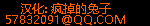
<style>
.page{position:relative;width:150px;height:26px;background:#000000}
.page>*{position:absolute;margin:0}
.t1{font:12px/11px "MicrosoftYaHei";color:#ff5f00}
</style>
<div class="page">
<p class="t1" style="left:6px;top:3px;width:119px;height:22px;text-align:center">汉化: 疯掉的兔子<br>57832091@QQ.COM</p>
</div>
